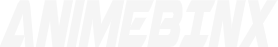
<style>
.page{position:relative;width:278px;height:47px;background:#f5f5f5}
.page>*{position:absolute;margin:0}
.t1{font:88.3px "Airstrike";color:#f5f5f5;scale:0.53 1}
</style>
<div class="page">
<p class="t1" style="left:0px;top:0px;width:278px;height:47px">AnimeBInX</p>
</div>
